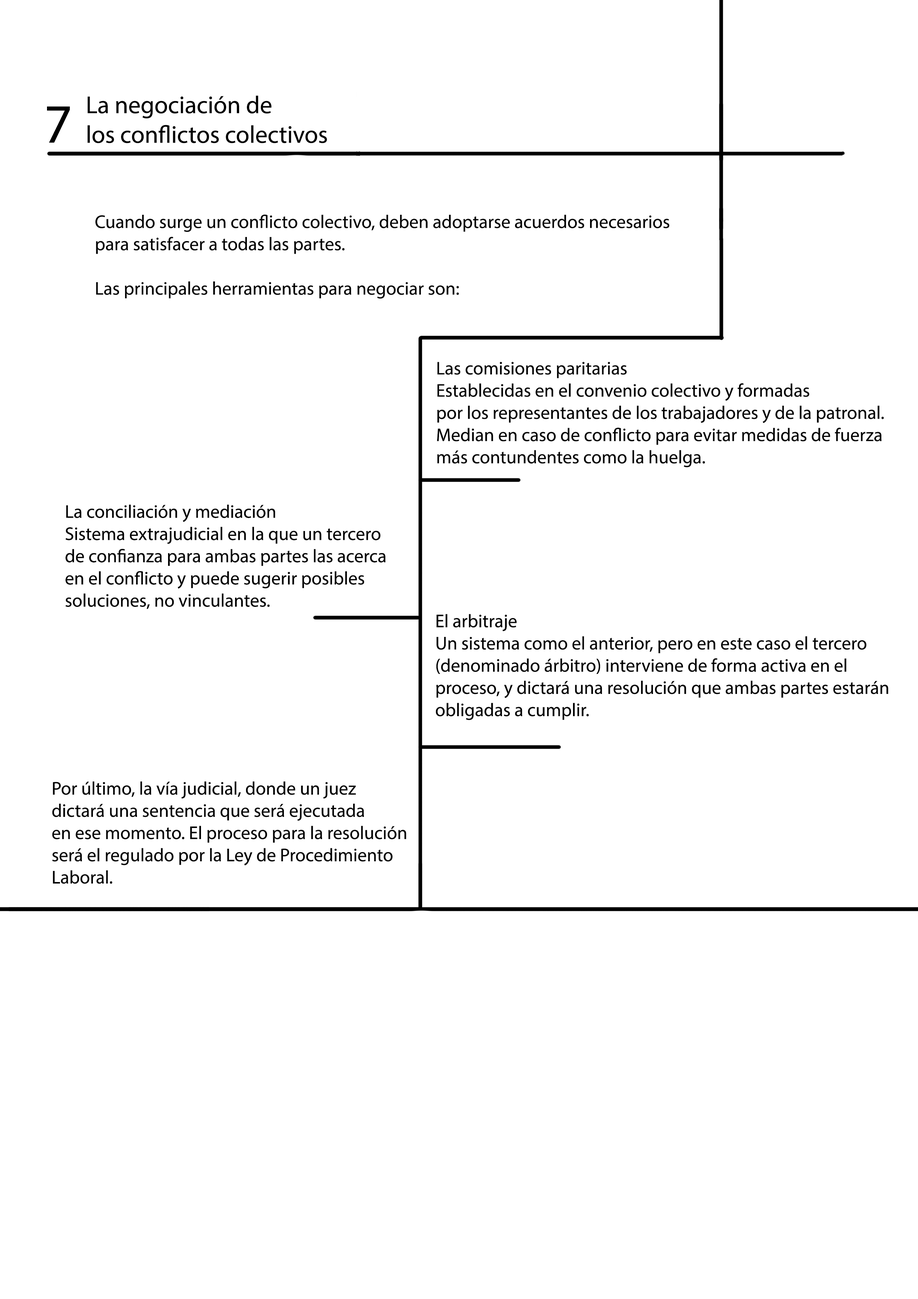
<style>
.page{position:relative;width:918px;height:1299px;background:#ffffff}
.page>*{position:absolute;margin:0}
.t1{font:24.7px "MyriadPro-Regular";color:#000000}
.t2{font:55.5px "MyriadPro-Regular";color:#000000}
.t3{font:18.5px "MyriadPro-Regular";color:#000000}
</style>
<div class="page">
<p class="t1" style="left:87px;top:96px;width:240px;height:47px">La negociación de <br>los conflictos colectivos</p>
<p class="t2" style="left:47px;top:106px;width:23px;height:37px">7</p>
<p class="t3" style="left:95px;top:214px;width:574px;height:85px">Cuando surge un conflicto colectivo, deben adoptarse acuerdos necesarios<br>para satisfacer a todas las partes.<br><br>Las principales herramientas para negociar son:</p>
<p class="t3" style="left:437px;top:362px;width:447px;height:105px">Las comisiones paritarias<br>Establecidas en el convenio colectivo y formadas<br>por los representantes de los trabajadores y de la patronal.<br>Median en caso de conflicto para evitar medidas de fuerza<br>más contundentes como la huelga.</p>
<p class="t3" style="left:66px;top:504px;width:320px;height:105px">La conciliación y mediación<br>Sistema extrajudicial en la que un tercero<br>de confianza para ambas partes las acerca<br>en el conflicto y puede sugerir posibles<br>soluciones, no vinculantes.</p>
<p class="t3" style="left:436px;top:614px;width:453px;height:106px">El arbitraje<br>Un sistema como el anterior, pero en este caso el tercero<br>(denominado árbitro) interviene de forma activa en el<br>proceso, y dictará una resolución que ambas partes estarán<br>obligadas a cumplir.</p>
<p class="t3" style="left:52px;top:781px;width:355px;height:103px">Por último, la vía judicial, donde un juez<br>dictará una sentencia que será ejecutada<br>en ese momento. El proceso para la resolución<br>será el regulado por la Ley de Procedimiento<br>Laboral.</p>
</div>
